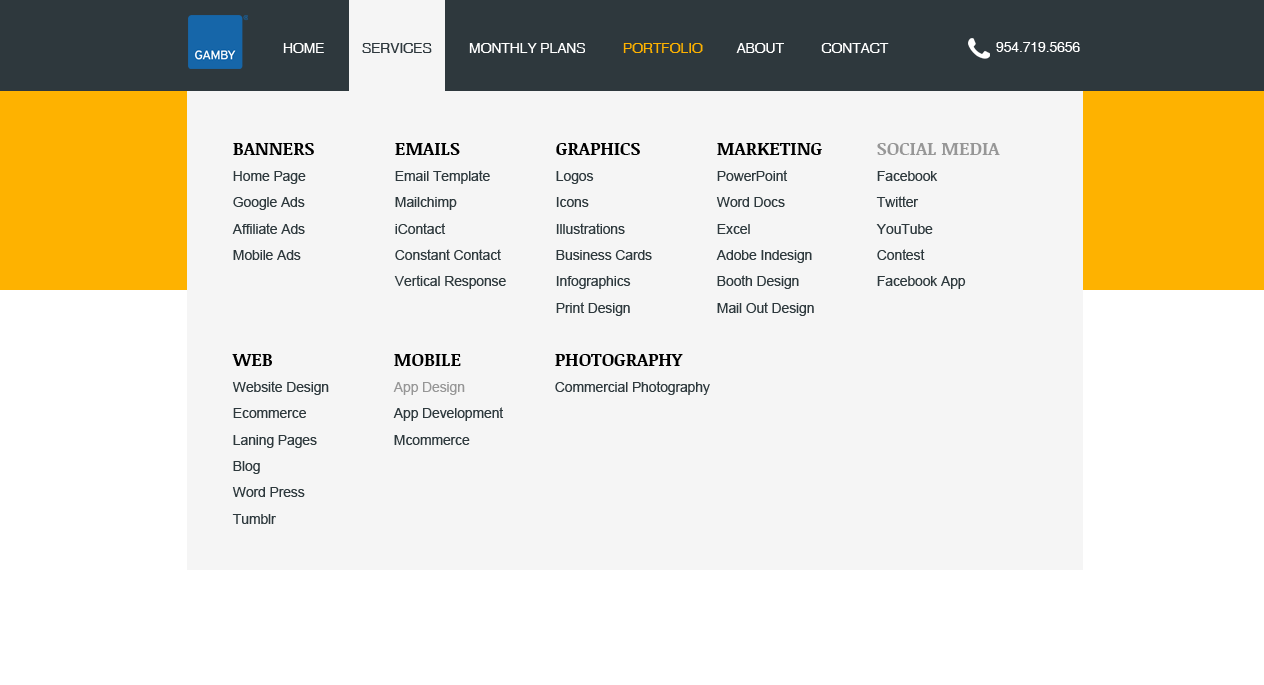
<style>
.page{position:relative;width:1264px;height:685px;background:#f5f5f5}
.page>*{position:absolute;margin:0}
.t1{font:14px "Helvetica";letter-spacing:-0.01em;color:#ffffff;text-transform:uppercase}
.t2{font:14px "Helvetica";letter-spacing:-0.01em;color:#2e383d;text-transform:uppercase}
.t3{font:14px "Helvetica";letter-spacing:-0.01em;color:#feb200;text-transform:uppercase}
.t4{font:14px/26.4px "ArialMT";letter-spacing:-0.01em;color:#2e393d}
.t5{font:18px "NoticiaText-Bold";color:#000000}
.t6{font:18px "NoticiaText-Bold";color:#979797}
.t7{font:14px/26.4px "ArialMT";letter-spacing:-0.01em;color:#969696}
</style>
<div class="page">
<p class="t1" style="left:283px;top:43px;width:606px;height:10px">home          <span class="t2">services  </span>        MONTHLY PLANS          <span class="t3">portfolio</span>         about          contact</p>
<p class="t1" style="left:996px;top:42px;width:84px;height:10px">954.719.5656</p>
<p class="t4" style="left:232px;top:143px;width:82px;height:117px"><span class="t5">BANNERS<br></span>Home Page<br>Google Ads<br>Affiliate Ads<br>Mobile Ads</p>
<p class="t4" style="left:394px;top:143px;width:112px;height:146px"><span class="t5">EMAILS<br></span>Email Template<br>Mailchimp<br>iContact<br>Constant Contact<br>Vertical Response</p>
<p class="t4" style="left:556px;top:143px;width:96px;height:173px"><span class="t5">GRAPHICS<br></span>Logos<br>Icons<br>Illustrations<br>Business Cards<br>Infographics<br>Print Design</p>
<p class="t4" style="left:716px;top:143px;width:106px;height:173px"><span class="t5">MARKETING<br></span>PowerPoint<br>Word Docs<br>Excel<br>Adobe Indesign<br>Booth Design<br>Mail Out Design</p>
<p class="t4" style="left:876px;top:143px;width:124px;height:146px"><span class="t6">SOCIAL MEDIA<br></span>Facebook<br>Twitter<br>YouTube<br>Contest<br>Facebook App</p>
<p class="t4" style="left:232px;top:354px;width:97px;height:170px"><span class="t5">WEB<br></span>Website Design<br>Ecommerce<br>Laning Pages<br>Blog<br>Word Press<br>Tumblr</p>
<p class="t4" style="left:393px;top:354px;width:111px;height:91px"><span class="t5">MOBILE<br></span><span class="t7">App Design<br></span>App Development<br>Mcommerce</p>
<p class="t4" style="left:555px;top:354px;width:155px;height:41px"><span class="t5">PHOTOGRAPHY</span><br>Commercial Photography</p>
</div>
